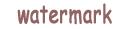
<style>
.page{position:relative;width:130px;height:29px;background:#ffffff}
.page>*{position:absolute;margin:0}
.t1{font:24.8px "ComicSansMS";letter-spacing:0.005em;color:#916464;font-weight:bold;scale:0.72 1}
</style>
<div class="page">
<p class="t1" style="left:17px;top:3px;width:95px;height:22px">watermark</p>
</div>
